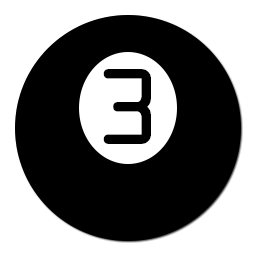
<style>
.page{position:relative;width:256px;height:256px;background:#000000}
.page>*{position:absolute;margin:0}
.t1{font:96px "OCRAStd";color:#000000}
</style>
<div class="page">
<p class="t1" style="left:103px;top:69px;width:48px;height:75px">3</p>
</div>
